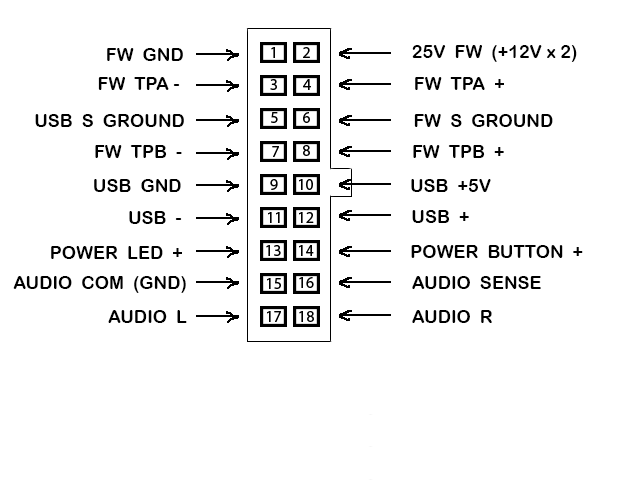
<style>
.page{position:relative;width:640px;height:480px;background:#ffffff}
.page>*{position:absolute;margin:0}
.t1{font:18px "ArialRoundedMTBold";color:#000000}
</style>
<div class="page">
<p class="t1" style="left:107px;top:48px;width:76px;height:13px">FW  GND</p>
<p class="t1" style="left:412px;top:45px;width:165px;height:17px">25V  FW  (+12V x 2)</p>
<p class="t1" style="left:98px;top:77px;width:82px;height:13px">FW  TPA -</p>
<p class="t1" style="left:415px;top:77px;width:89px;height:13px">FW  TPA  +</p>
<p class="t1" style="left:35px;top:114px;width:149px;height:13px">USB  S  GROUND</p>
<p class="t1" style="left:414px;top:114px;width:139px;height:13px">FW  S  GROUND</p>
<p class="t1" style="left:95px;top:145px;width:87px;height:13px">FW  TPB  -</p>
<p class="t1" style="left:413px;top:145px;width:91px;height:13px">FW  TPB  +</p>
<p class="t1" style="left:94px;top:179px;width:87px;height:13px">USB  GND</p>
<p class="t1" style="left:411px;top:179px;width:80px;height:13px">USB  +5V</p>
<p class="t1" style="left:129px;top:211px;width:53px;height:13px">USB  -</p>
<p class="t1" style="left:412px;top:210px;width:57px;height:13px">USB  +</p>
<p class="t1" style="left:51px;top:246px;width:131px;height:13px">POWER  LED  +</p>
<p class="t1" style="left:411px;top:245px;width:172px;height:13px">POWER  BUTTON  +</p>
<p class="t1" style="left:13px;top:276px;width:173px;height:17px">AUDIO  COM  (GND)</p>
<p class="t1" style="left:412px;top:276px;width:129px;height:13px">AUDIO  SENSE</p>
<p class="t1" style="left:108px;top:310px;width:79px;height:13px">AUDIO  L</p>
<p class="t1" style="left:412px;top:310px;width:80px;height:13px">AUDIO  R</p>
</div>
